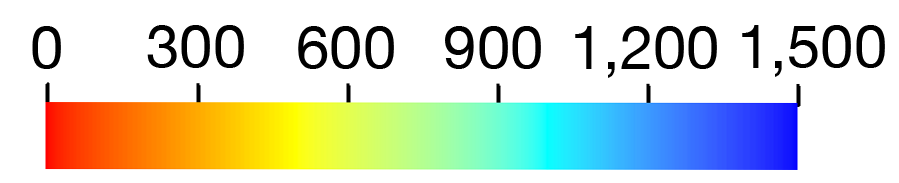
<style>
.page{position:relative;width:899px;height:183px;background:#ffffff}
.page>*{position:absolute;margin:0}
.t1{font:60px "HelveticaNeue";color:#000000;text-transform:uppercase}
</style>
<div class="page">
<p class="t1" style="left:32px;top:26px;width:29px;height:43px">0</p>
<p class="t1" style="left:147px;top:25px;width:97px;height:43px">300</p>
<p class="t1" style="left:298px;top:26px;width:96px;height:43px">600</p>
<p class="t1" style="left:445px;top:26px;width:96px;height:43px">900</p>
<p class="t1" style="left:575px;top:26px;width:142px;height:52px">1,200</p>
<p class="t1" style="left:742px;top:25px;width:143px;height:52px">1,500</p>
</div>
